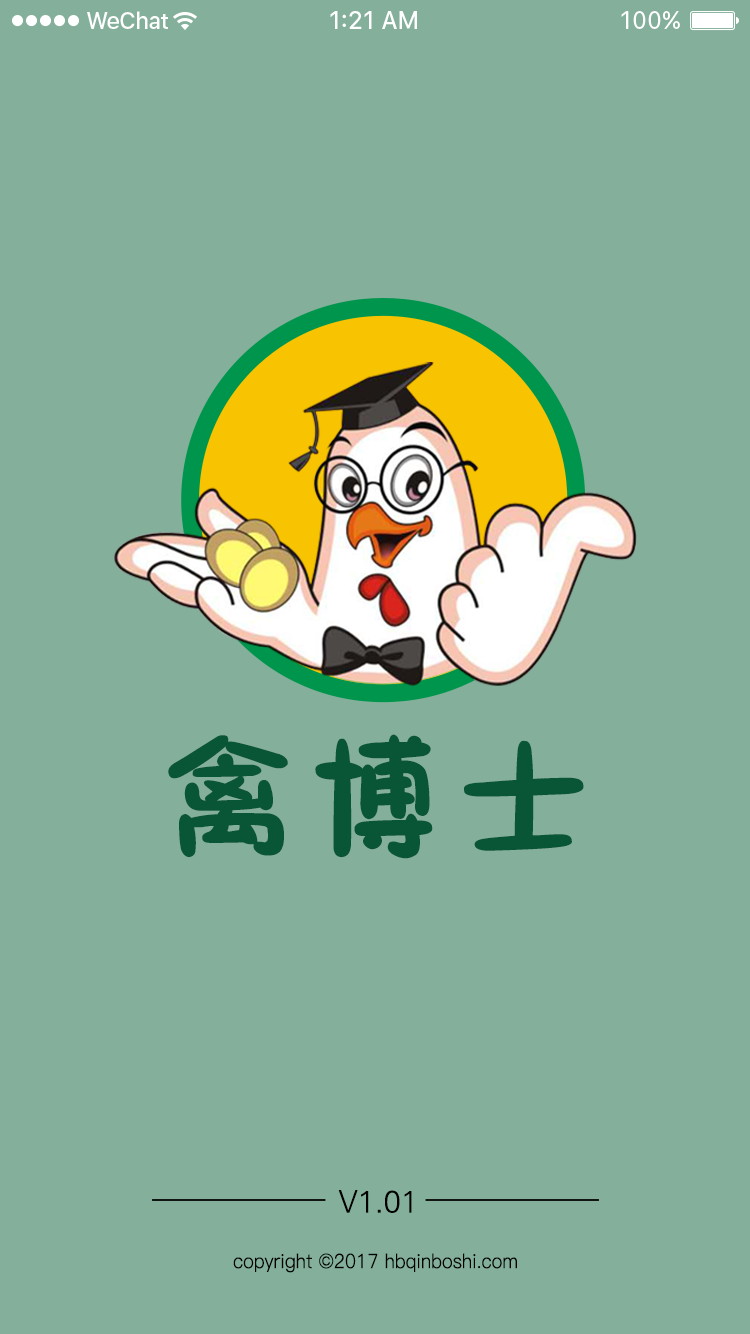
<style>
.page{position:relative;width:750px;height:1334px;background:#83af9b}
.page>*{position:absolute;margin:0}
.t1{font:135px "FZSEJW--GB1-0";letter-spacing:0.1em;color:#085636;text-transform:uppercase}
.t2{font:31px "FZY1JW--GB1-0";color:#000000}
.t3{font:19.8px "PingFang-SC-Regular";color:#010101;scale:0.94 1}
</style>
<div class="page">
<p class="t1" style="left:168px;top:734px;width:416px;height:125px">禽博士</p>
<p class="t2" style="left:338px;top:1190px;width:74px;height:23px">V1.01</p>
<p class="t3" style="left:233px;top:1253px;width:284px;height:20px">copyright ©2017 hbqinboshi.com</p>
</div>
